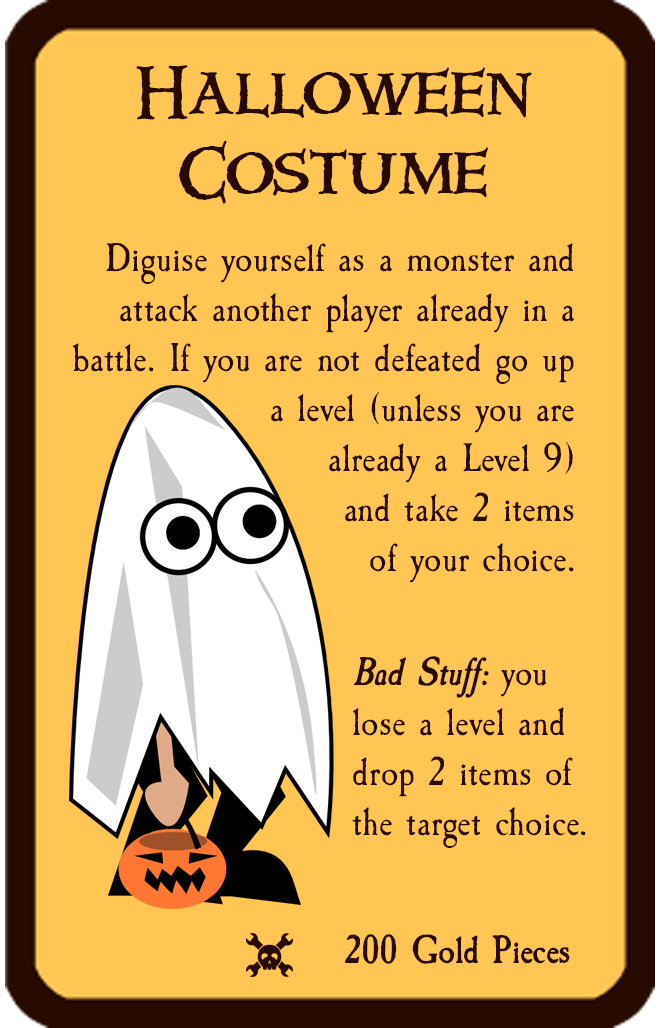
<style>
.page{position:relative;width:661px;height:1028px;background:#ffc654}
.page>*{position:absolute;margin:0}
.t1{font:66.7px "Windlass";color:#270b00}
.t2{font:41.7px "CaslonAntique";color:#270b00}
.t3{font:41.7px "CaslonAntique-BoldItalic";color:#270b00}
.t4{font:41.7px "CaslonAntique-Bold";color:#270b00}
</style>
<div class="page">
<p class="t1" style="left:136px;top:65px;width:396px;height:139px;text-align:center">Halloween Costume</p>
<p class="t2" style="left:72px;top:243px;width:503px;height:340px;text-align:right">Diguise yourself as a monster and attack another player already in a battle. If you are not defeated go up a level (unless you are <br>already a Level 9) <br>and take 2 items <br>of your choice.</p>
<p class="t2" style="left:352px;top:656px;width:234px;height:192px"><span class="t3">Bad Stuff:</span> you lose a level and drop 2 items of the target choice.</p>
<p class="t4" style="left:345px;top:934px;width:225px;height:30px">200 Gold Pieces</p>
</div>
